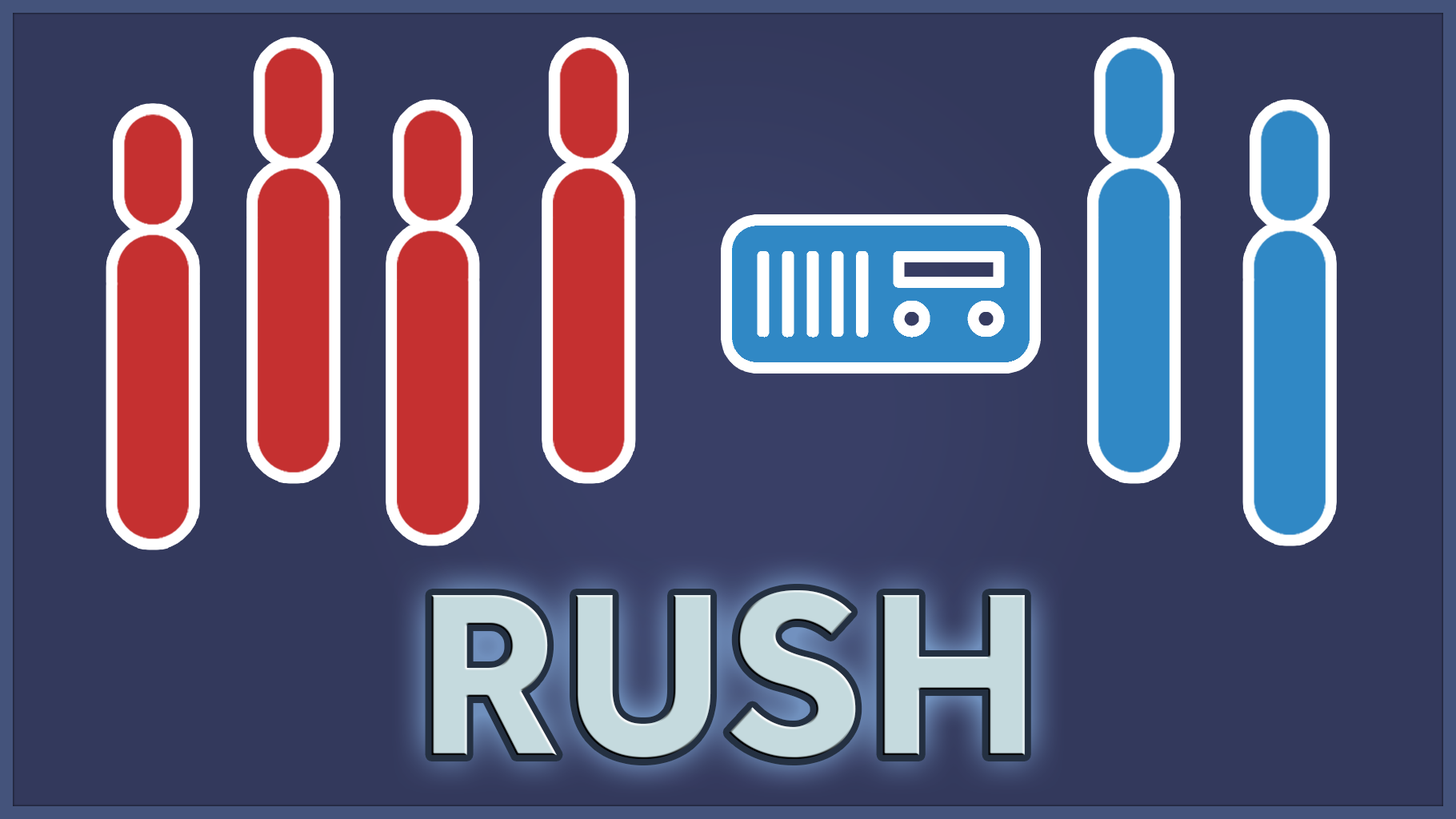
<style>
.page{position:relative;width:1456px;height:819px;background:#33395c}
.page>*{position:absolute;margin:0}
.t1{font:240px "Effra-Bold";color:#c5dade}
</style>
<div class="page">
<p class="t1" style="left:431px;top:590px;width:594px;height:169px">RUSH</p>
</div>
